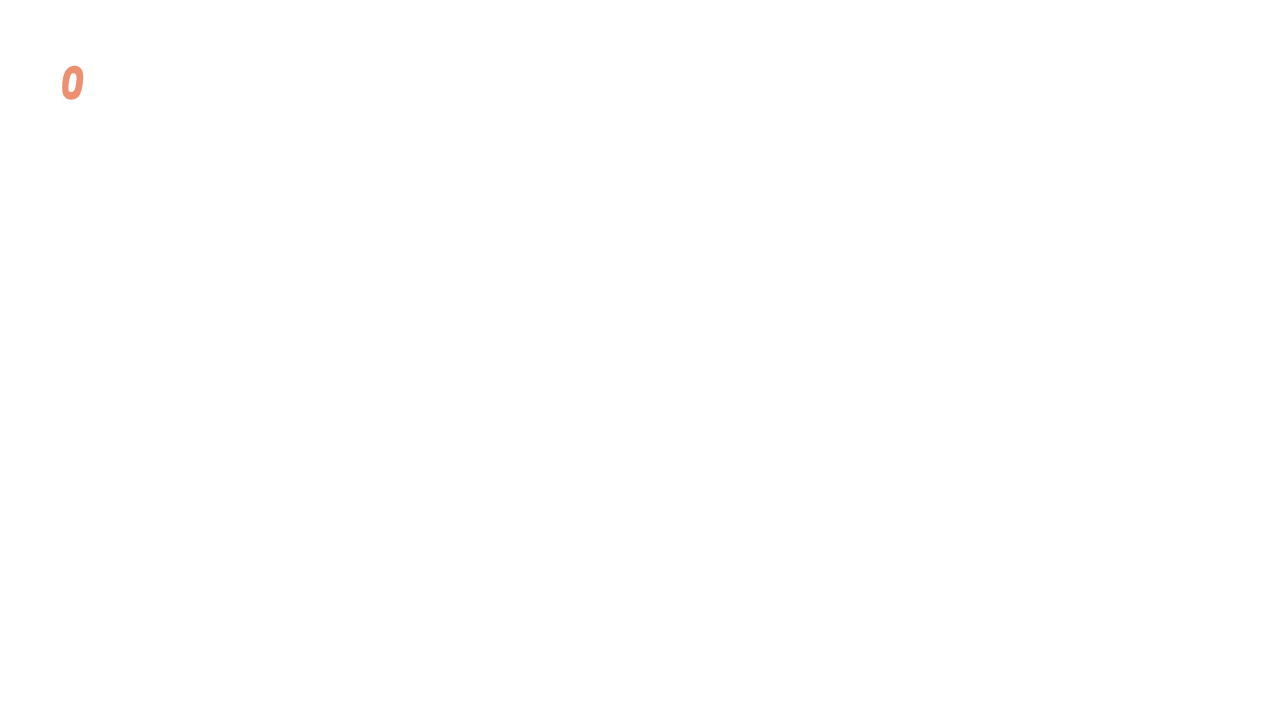
<style>
.page{position:relative;width:1280px;height:720px;background:#ffffff}
.page>*{position:absolute;margin:0}
.t1{font:37.5px "HGSoeiKakupoptai";letter-spacing:0.075em;color:#ed9070;scale:1.26 1}
</style>
<div class="page">
<p class="t1" style="left:62px;top:65px;width:22px;height:35px">0</p>
</div>
